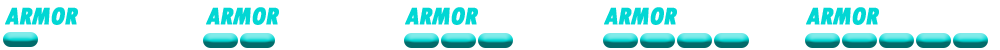
<style>
.page{position:relative;width:1000px;height:50px;background:#ffffff}
.page>*{position:absolute;margin:0}
.t1{font:24.9px "TwCenMT-CondensedExtraBold";letter-spacing:-0.02em;color:#02d7d4;text-transform:uppercase;font-weight:bold;font-style:italic}
</style>
<div class="page">
<p class="t1" style="left:5px;top:7px;width:73px;height:18px">armor</p>
<p class="t1" style="left:206px;top:7px;width:73px;height:18px">armor</p>
<p class="t1" style="left:405px;top:7px;width:73px;height:18px">armor</p>
<p class="t1" style="left:604px;top:7px;width:73px;height:18px">armor</p>
<p class="t1" style="left:806px;top:7px;width:73px;height:18px">armor</p>
</div>
